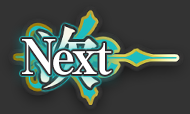
<style>
.page{position:relative;width:190px;height:114px;background:#333333}
.page>*{position:absolute;margin:0}
.t1{font:48px "RyuminPro-ExBold";letter-spacing:-0.08em;color:#ffffff}
</style>
<div class="page">
<p class="t1" style="left:22px;top:39px;width:90px;height:36px">Next</p>
</div>
